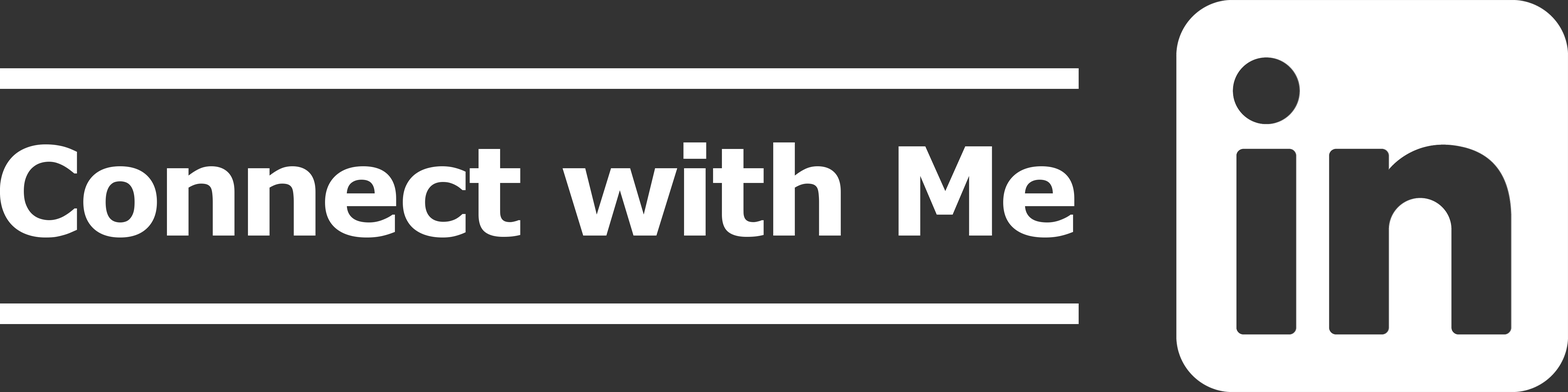
<style>
.page{position:relative;width:1568px;height:392px;background:#333333}
.page>*{position:absolute;margin:0}
.t1{font:122.5px "Verdana-Bold";letter-spacing:-0.02em;color:#ffffff}
</style>
<div class="page">
<p class="t1" style="left:0px;top:142px;width:1074px;height:95px">Connect with Me</p>
</div>
